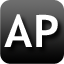
<style>
.page{position:relative;width:64px;height:64px}
.page>*{position:absolute;margin:0}
.t1{font:45px "TrebuchetMS-Bold";color:#ffffff}
</style>
<div class="page">
<p class="t1" style="left:4px;top:14px;width:54px;height:33px">AP</p>
</div>
